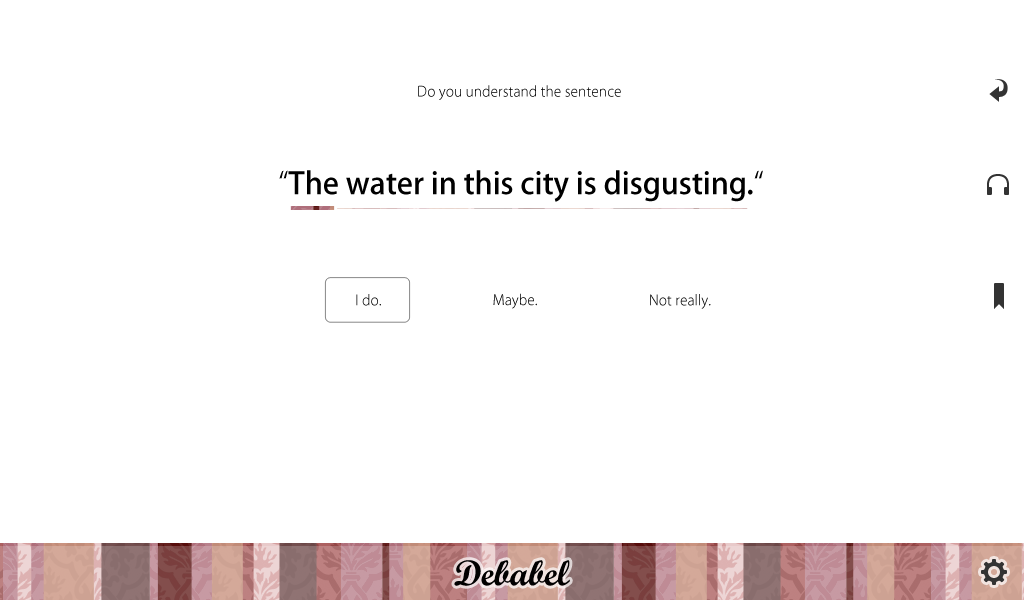
<style>
.page{position:relative;width:1024px;height:600px;background:#ffffff}
.page>*{position:absolute;margin:0}
.t1{font:14px "KozGoPro-Light";color:#000000}
.t2{font:30px "KozGoPro-Medium";color:#000000}
.t3{font:30px "KozGoPro-Light";color:#000000}
.t4{font:14px "KozGoPro-Light"}
.t5{font:36px "WrexhamScript";color:#010000}
</style>
<div class="page">
<p class="t1" style="left:418px;top:85px;width:203px;height:15px">Do you understand the sentence</p>
<p class="t2" style="left:279px;top:170px;width:484px;height:32px"><span class="t3">“</span>The water in this city is disgusting.<span class="t3">“</span></p>
<p class="t4" style="left:356px;top:294px;width:25px;height:12px">I do.</p>
<p class="t1" style="left:493px;top:293px;width:44px;height:16px">Maybe.</p>
<p class="t4" style="left:650px;top:294px;width:61px;height:15px">Not really.</p>
<p class="t5" style="left:454px;top:560px;width:116px;height:26px">Debabel</p>
</div>
